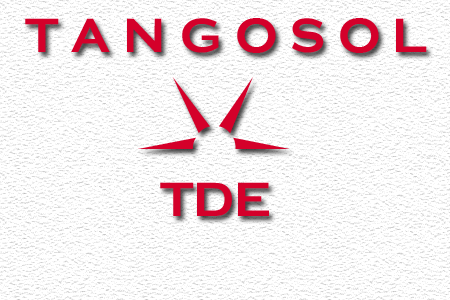
<style>
.page{position:relative;width:450px;height:300px;background:#ffffff}
.page>*{position:absolute;margin:0}
.t1{font:49.8px "Tangosol";color:#d4002a}
.t2{font:85.3px "Tangosol";color:#d4002a}
</style>
<div class="page">
<p class="t1" style="left:25px;top:18px;width:402px;height:35px">t a n g o s o l</p>
<p class="t2" style="left:138px;top:77px;width:152px;height:72px">Þ</p>
<p class="t1" style="left:160px;top:182px;width:109px;height:34px">TDE</p>
</div>
